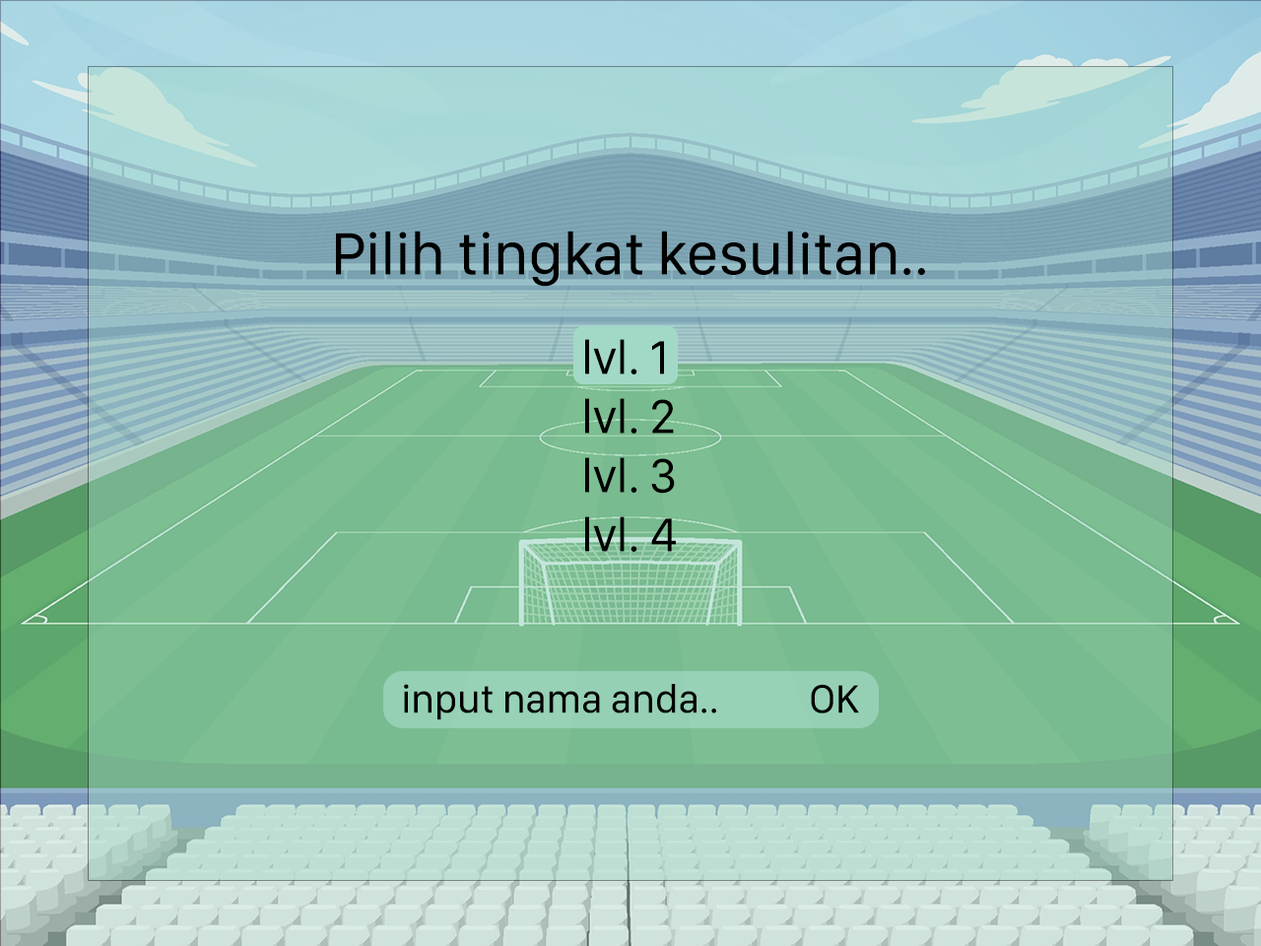
<style>
.page{position:relative;width:1261px;height:946px}
.page>*{position:absolute;margin:0}
.t1{font:61.6px "SFCompactDisplay-Regular";color:#000000}
.t2{font:49.3px "SFCompactDisplay-Regular";color:#000000}
.t3{font:41px "SFCompactDisplay-Regular";color:#000000}
</style>
<div class="page">
<p class="t1" style="left:336px;top:231px;width:589px;height:56px">Pilih tingkat kesulitan..</p>
<p class="t2" style="left:585px;top:339px;width:91px;height:213px">lvl. 1<br>lvl. 2<br>lvl. 3<br>lvl. 4</p>
<p class="t3" style="left:404px;top:684px;width:455px;height:36px">input nama anda..           OK</p>
</div>
